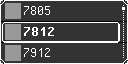
<style>
.page{position:relative;width:128px;height:64px;background:#333333}
.page>*{position:absolute;margin:0}
.t1{font:16px "PixelOperator";color:#ffffff}
.t2{font:16px "PixelOperator-Bold";color:#ffffff}
</style>
<div class="page">
<p class="t1" style="left:24px;top:6px;width:26px;height:9px">7805</p>
<p class="t2" style="left:24px;top:27px;width:30px;height:9px">7812</p>
<p class="t1" style="left:24px;top:48px;width:26px;height:9px">7912</p>
</div>
